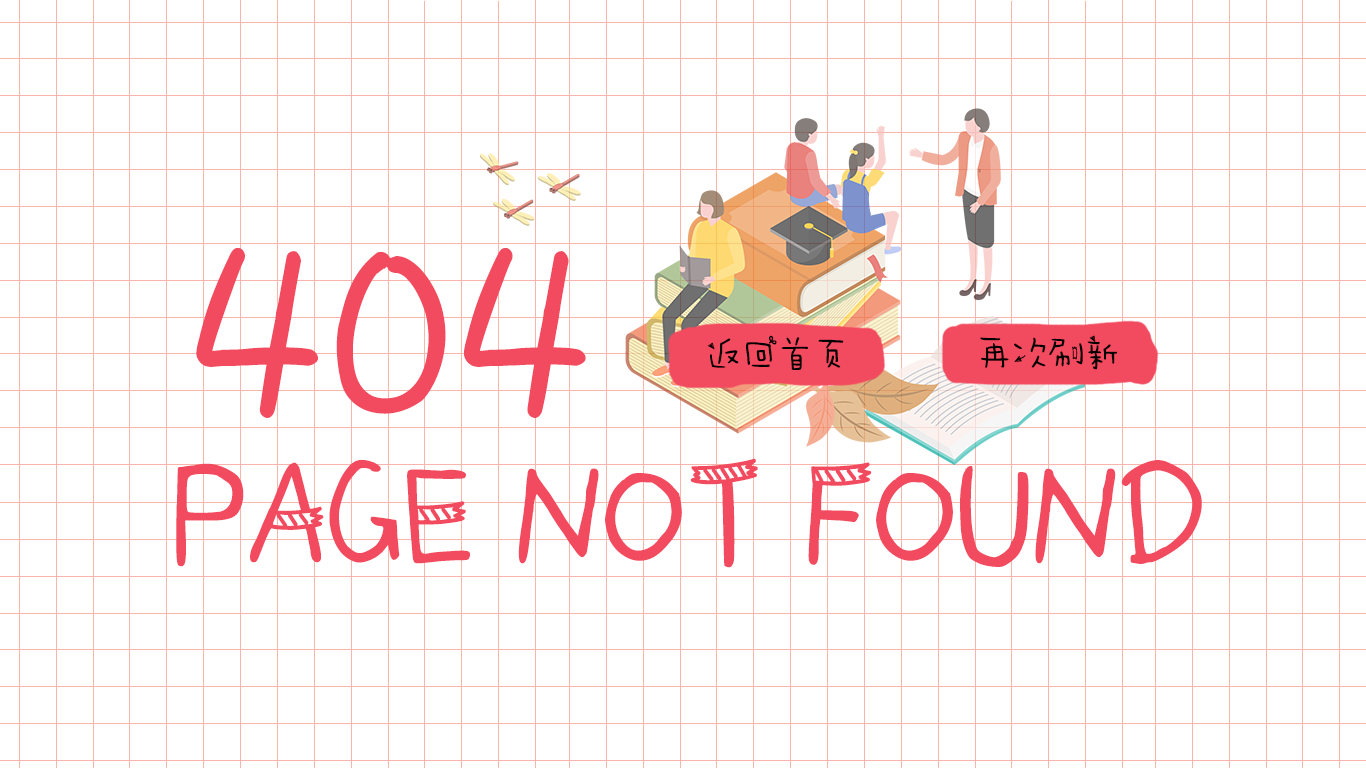
<style>
.page{position:relative;width:1366px;height:768px;background:#ffffff}
.page>*{position:absolute;margin:0}
.t1{font:270px "AaPaperTape";color:#f24b5f}
.t2{font:36px "AaPaperTape";color:#000000}
.t3{font:140px "AaPaperTape";color:#f24b5f}
</style>
<div class="page">
<p class="t1" style="left:196px;top:248px;width:390px;height:170px">404</p>
<p class="t2" style="left:708px;top:335px;width:136px;height:35px">返回首页</p>
<p class="t2" style="left:980px;top:335px;width:137px;height:35px">再次刷新</p>
<p class="t3" style="left:176px;top:458px;width:1026px;height:110px">PAGE NOT FOUND</p>
</div>
